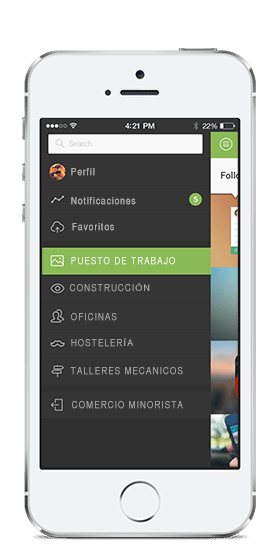
<style>
.page{position:relative;width:280px;height:560px;background:#ffffff}
.page>*{position:absolute;margin:0}
.t1{font:9.6px "HelveticaCYPlain";letter-spacing:0.1em;color:#b0b0b0;scale:1.05 1}
.t2{font:9.6px "HelveticaCYPlain";letter-spacing:0.1em;color:#ffffff;scale:1.05 1}
.t3{font:9.6px "MyriadPro-Regular";letter-spacing:0.1em;color:#b0b0b0;scale:1.05 1}
</style>
<div class="page">
<p class="t1" style="left:71px;top:168px;width:24px;height:8px">Perfil</p>
<p class="t1" style="left:71px;top:168px;width:24px;height:8px">Perfil</p>
<p class="t1" style="left:71px;top:197px;width:65px;height:8px">Notificaciones</p>
<p class="t1" style="left:71px;top:197px;width:65px;height:8px">Notificaciones</p>
<p class="t1" style="left:72px;top:223px;width:42px;height:8px">Favoritos</p>
<p class="t1" style="left:72px;top:223px;width:42px;height:8px">Favoritos</p>
<p class="t2" style="left:71px;top:257px;width:104px;height:8px">PUESTO DE TRABAJO</p>
<p class="t1" style="left:70px;top:283px;width:80px;height:9px">CONSTRUCCI<span class="t3">ÓN</span></p>
<p class="t1" style="left:71px;top:313px;width:46px;height:8px">OFICINAS</p>
<p class="t1" style="left:71px;top:338px;width:62px;height:9px">HOSTELER<span class="t3">ÍA</span></p>
<p class="t1" style="left:70px;top:367px;width:113px;height:8px">TALLERES MECANICOS</p>
<p class="t1" style="left:72px;top:401px;width:111px;height:8px">COMERCIO MINORISTA</p>
</div>
